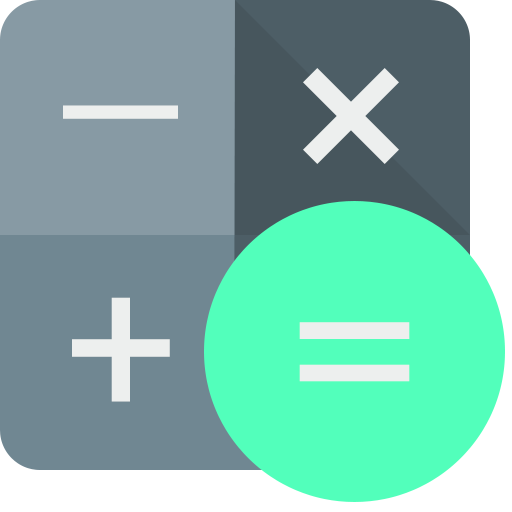
<style>
.page{position:relative;width:512px;height:512px;background:#52ffbb}
.page>*{position:absolute;margin:0}
.t1{font:500px "Roboto-Thin";letter-spacing:0.04em;color:#edefee}
.t2{font:200px "Roboto-Regular";letter-spacing:0.04em;color:#edefee}
.t3{font:208.4px "Roboto-Regular";letter-spacing:0.04em;color:#edefee;scale:1.29 1}
</style>
<div class="page">
<p class="t1" style="left:63px;top:105px;width:115px;height:14px">-</p>
<p class="t2" style="left:72px;top:297px;width:98px;height:105px">+</p>
<p class="t3" style="left:299px;top:322px;width:111px;height:60px">=</p>
</div>
